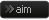
<style>
.page{position:relative;width:49px;height:20px}
.page>*{position:absolute;margin:0}
.t1{font:11px "Tahoma";color:#ababab}
</style>
<div class="page">
<p class="t1" style="left:16px;top:5px;width:15px;height:8px">aim</p>
</div>
